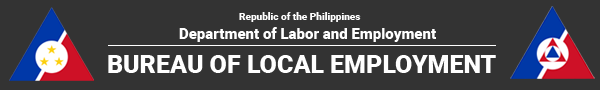
<style>
.page{position:relative;width:600px;height:90px;background:#333333}
.page>*{position:absolute;margin:0}
.t1{font:10px "Roboto-Black";color:#ffffff}
.t2{font:15px "Roboto-Black";color:#ffffff}
.t3{font:25px "Roboto-Black";color:#ffffff}
</style>
<div class="page">
<p class="t1" style="left:239px;top:12px;width:122px;height:10px">Republic of the Philippines</p>
<p class="t2" style="left:179px;top:27px;width:257px;height:15px">Department of Labor and Employment</p>
<p class="t3" style="left:108px;top:55px;width:388px;height:18px">BUREAU OF LOCAL EMPLOYMENT</p>
</div>
